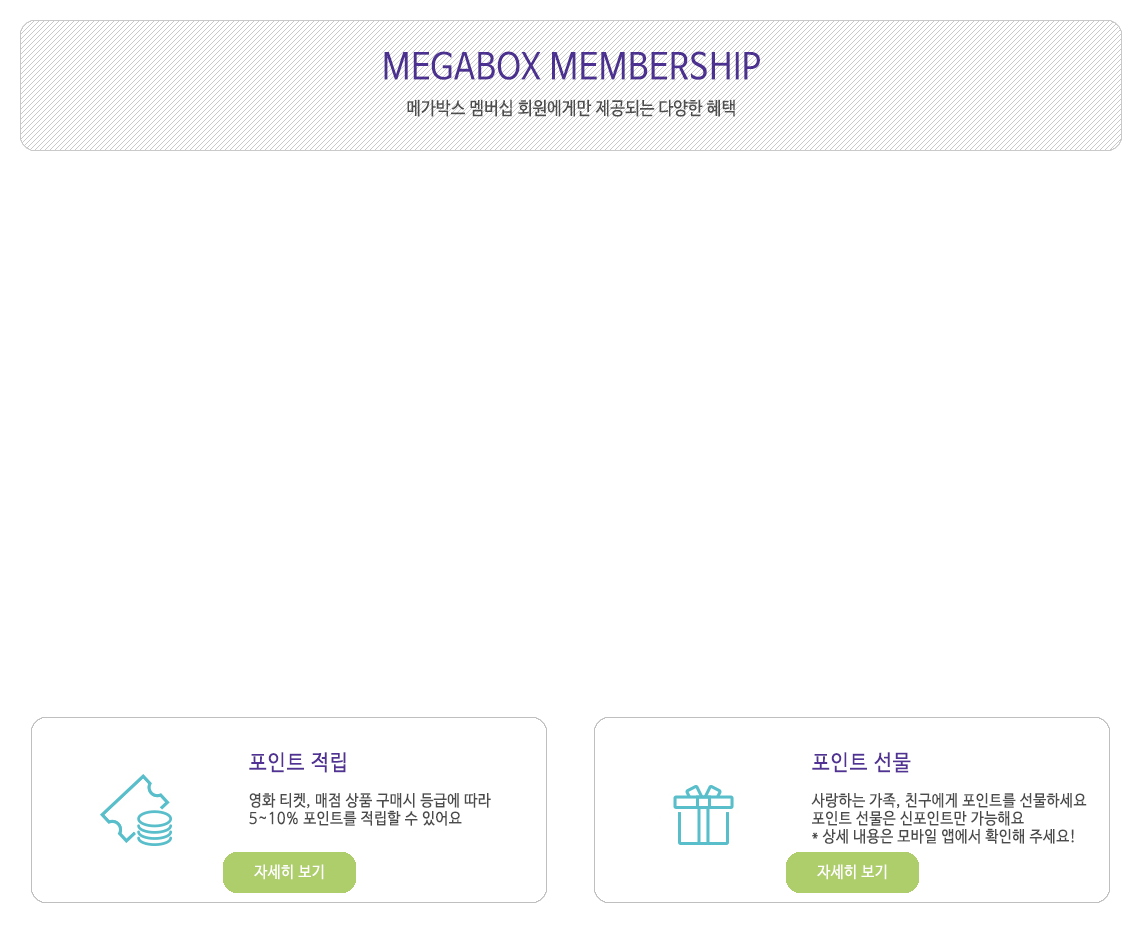
<style>
.page{position:relative;width:1144px;height:930px;background:#ffffff}
.page>*{position:absolute;margin:0}
.t1{font:18px/18px "NanumBarunGothic";letter-spacing:0.02em;color:#515151;scale:0.9 1}
.t2{font:36px/18px "NanumBarunGothic";letter-spacing:0.02em;color:#503396;scale:0.9 1}
.t3{font:16px/18px "NanumBarunGothic";letter-spacing:0.04em;color:#4b4b4b;scale:0.9 1}
.t4{font:22px/18px "NanumBarunGothic";letter-spacing:0.06em;color:#513194;scale:0.9 1}
.t5{font:16px "NanumBarunGothic";letter-spacing:0.04em;color:#ffffff;scale:0.9 1}
</style>
<div class="page">
<p class="t1" style="left:384px;top:51px;width:376px;height:66px;text-align:center"><span class="t2">MEGABOX MEMBERSHIP<br><br></span>메가박스 멤버십 회원에게만 제공되는 다양한 혜택</p>
<p class="t3" style="left:249px;top:752px;width:242px;height:74px"><span class="t4">포인트 적립<br><br></span>영화 티켓, 매점 상품 구매시 등급에 따라<br>5~10% 포인트를 적립할 수 있어요</p>
<p class="t3" style="left:811px;top:752px;width:276px;height:92px"><span class="t4">포인트 선물<br><br></span>사랑하는 가족, 친구에게 포인트를 선물하세요<br>포인트 선물은 신포인트만 가능해요<br>* 상세 내용은 모바일 앱에서 확인해 주세요!</p>
<p class="t5" style="left:254px;top:864px;width:70px;height:16px">자세히 보기</p>
<p class="t5" style="left:817px;top:864px;width:70px;height:16px">자세히 보기</p>
</div>
